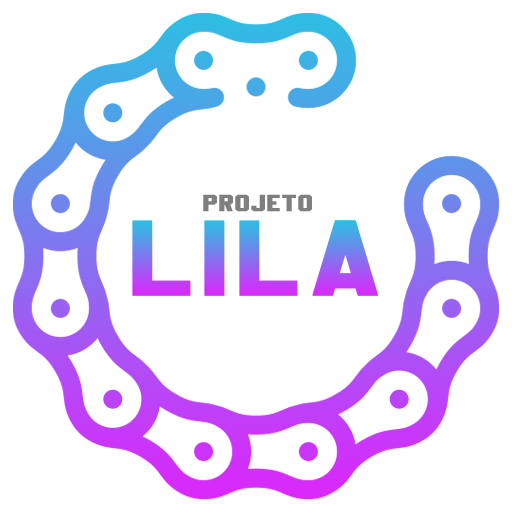
<style>
.page{position:relative;width:512px;height:512px;background:#ffffff}
.page>*{position:absolute;margin:0}
.t1{font:24px "Basketball";color:#7f7f7f;font-weight:bold;scale:1.33 1}
.t2{font:108.9px "Basketball";font-weight:bold;scale:1.33 1}
</style>
<div class="page">
<p class="t1" style="left:203px;top:194px;width:109px;height:18px">PROJETO</p>
<p class="t2" style="left:132px;top:220px;width:247px;height:76px">LILA</p>
</div>
